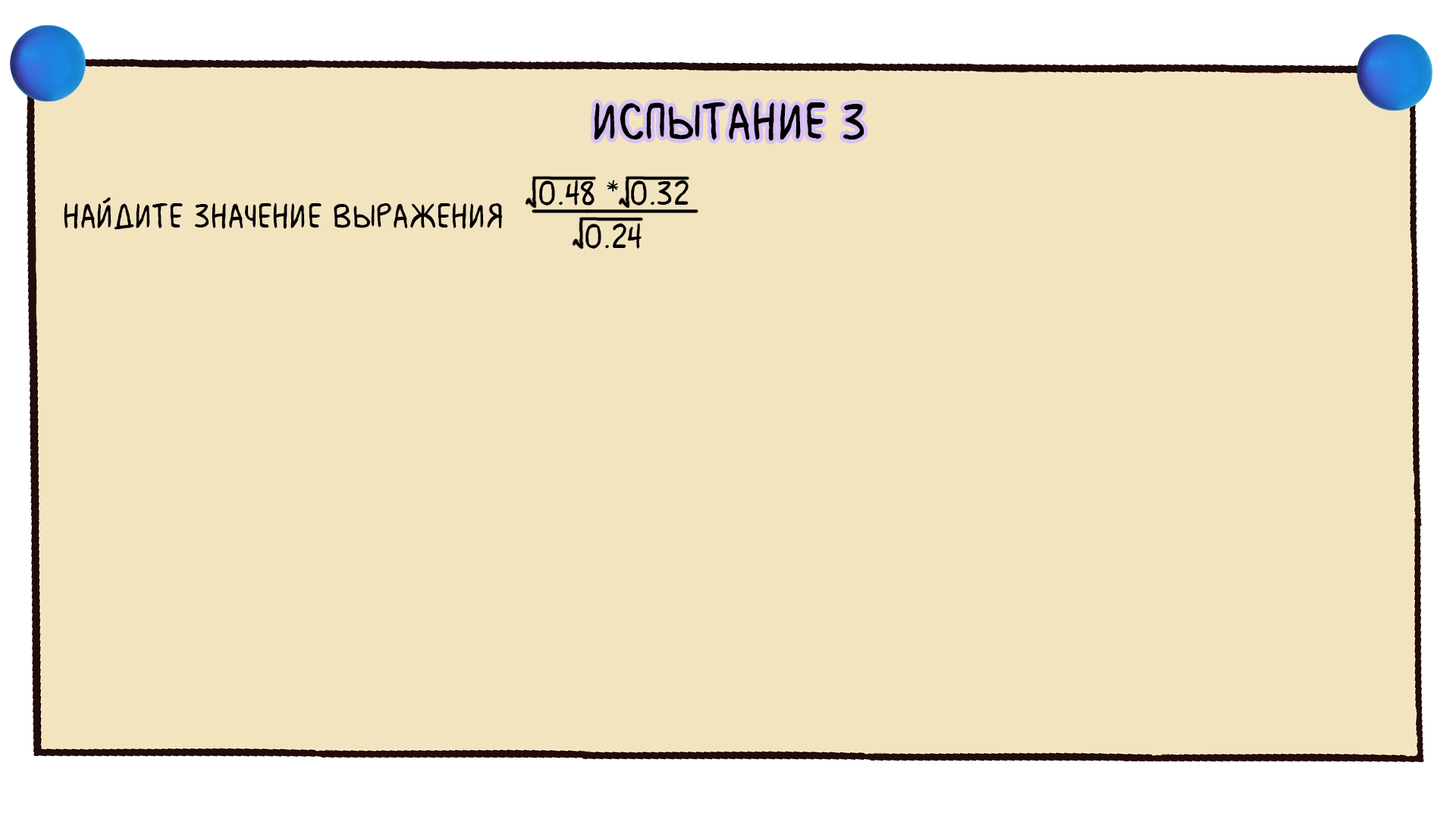
<style>
.page{position:relative;width:1456px;height:819px;background:#f3e4c0}
.page>*{position:absolute;margin:0}
.t1{font:54.6px "MilkMustacheBB";color:#000000}
.t2{font:36.4px "MilkMustacheBB";color:#000000}
</style>
<div class="page">
<p class="t1" style="left:594px;top:102px;width:270px;height:39px">испытание 3</p>
<p class="t2" style="left:64px;top:197px;width:439px;height:33px">Найдите значение выражения</p>
</div>
